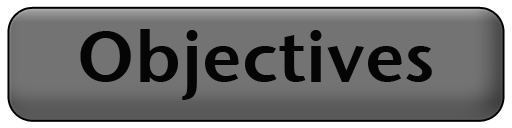
<style>
.page{position:relative;width:512px;height:128px;background:#737373}
.page>*{position:absolute;margin:0}
.t1{font:72px "StoneSansSemOSITCTTSemi";color:#050505}
</style>
<div class="page">
<p class="t1" style="left:80px;top:29px;width:352px;height:71px">Objectives</p>
</div>
